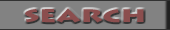
<style>
.page{position:relative;width:170px;height:30px;background:#828282}
.page>*{position:absolute;margin:0}
.t1{font:18px "Lithograph-Bold";color:#8b4e4e;scale:1.56 1}
</style>
<div class="page">
<p class="t1" style="left:25px;top:8px;width:119px;height:15px">Search</p>
</div>
